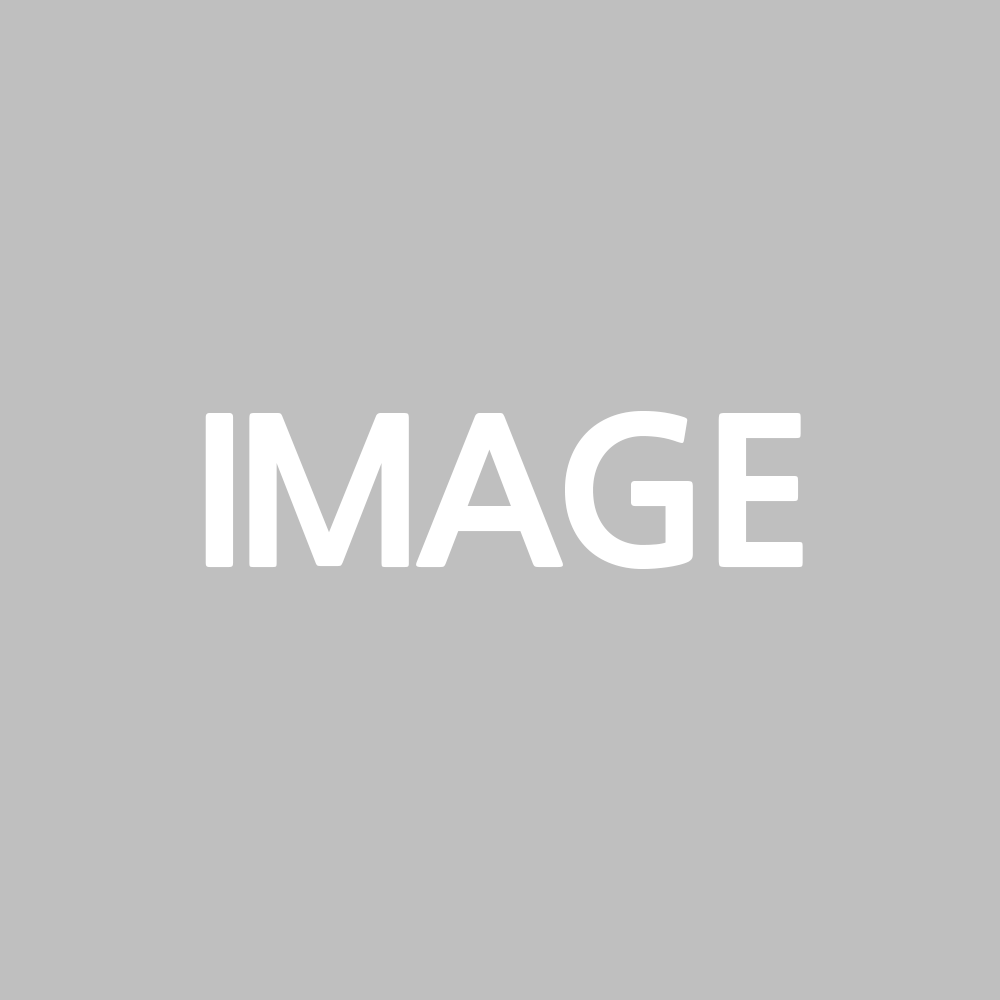
<style>
.page{position:relative;width:1000px;height:1000px;background:#bfbfbf}
.page>*{position:absolute;margin:0}
.t1{font:200px "NanumGothicExtraBold";letter-spacing:-0.05em;color:#ffffff;text-transform:uppercase}
</style>
<div class="page">
<p class="t1" style="left:205px;top:411px;width:598px;height:158px">IMAGE</p>
</div>
